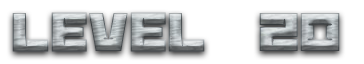
<style>
.page{position:relative;width:364px;height:64px;background:#ffffff}
.page>*{position:absolute;margin:0}
.t1{font:60px "BananaBrick"}
</style>
<div class="page">
<p class="t1" style="left:12px;top:12px;width:328px;height:40px">Level  20</p>
</div>
